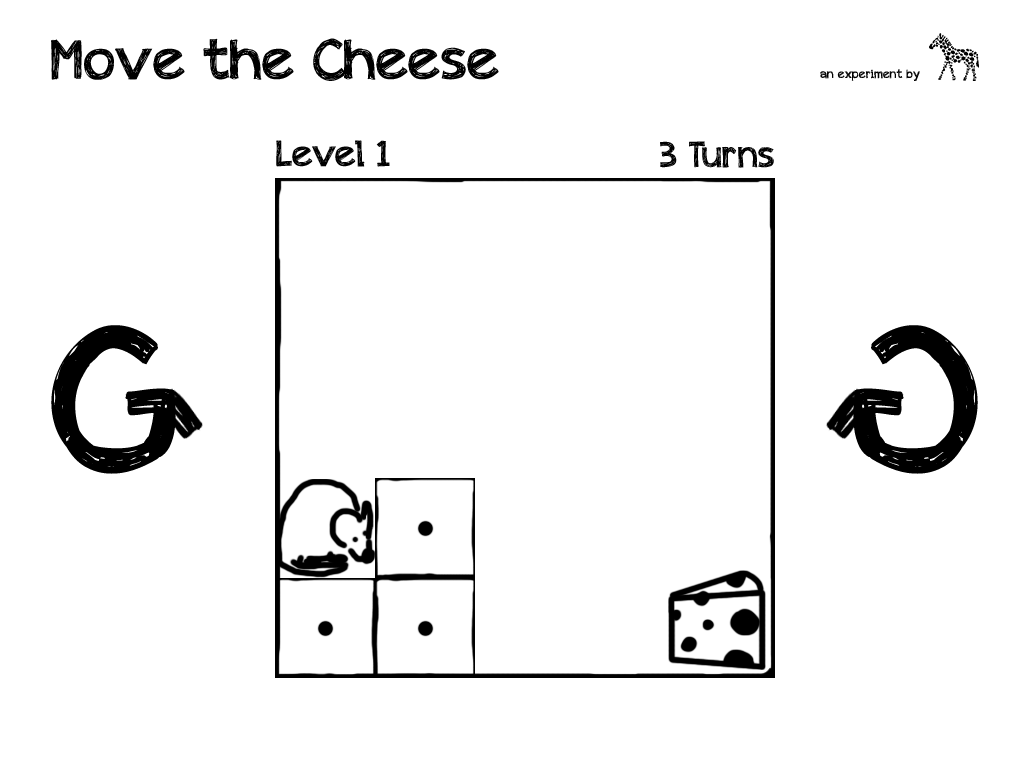
<style>
.page{position:relative;width:1024px;height:768px;background:#ffffff}
.page>*{position:absolute;margin:0}
.t1{font:56px "appleberry";color:#000000}
.t2{font:12px "appleberry";color:#000000}
.t3{font:36px "appleberry";color:#000000}
</style>
<div class="page">
<p class="t1" style="left:51px;top:38px;width:448px;height:43px">Move the Cheese</p>
<p class="t2" style="left:820px;top:69px;width:100px;height:12px">an experiment by</p>
<p class="t3" style="left:276px;top:140px;width:114px;height:27px">Level 1</p>
<p class="t3" style="left:660px;top:141px;width:114px;height:27px">3 Turns</p>
</div>
